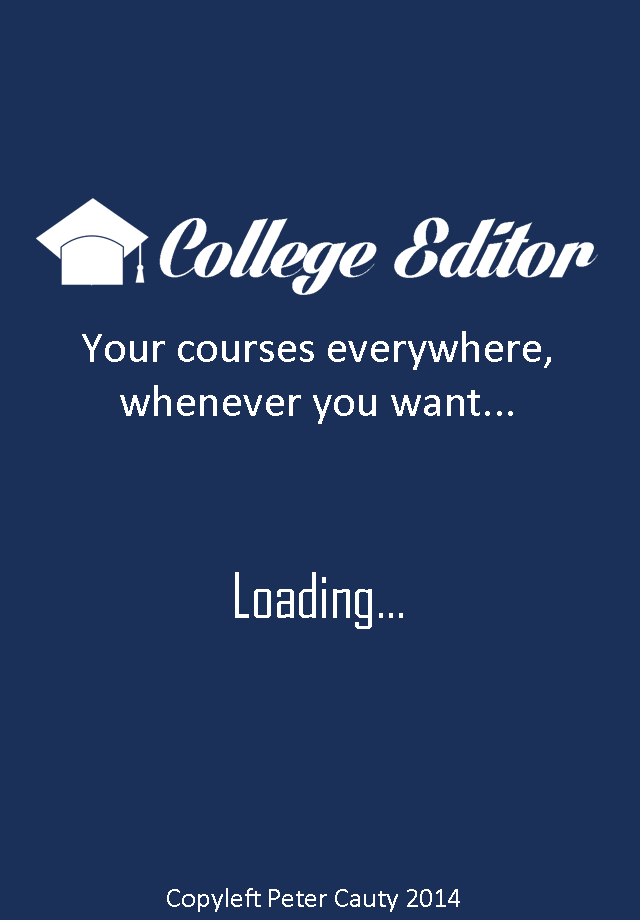
<style>
.page{position:relative;width:640px;height:920px;background:#1a3059}
.page>*{position:absolute;margin:0}
.t1{font:45px "Calibri";color:#ffffff}
.t2{font:60px "AgencyFB-Reg";color:#ffffff}
.t3{font:27.5px "Calibri";color:#ffffff}
</style>
<div class="page">
<p class="t1" style="left:82px;top:331px;width:469px;height:93px;text-align:center">Your courses everywhere,<br>whenever you want...</p>
<p class="t2" style="left:235px;top:572px;width:168px;height:57px">Loading...</p>
<p class="t3" style="left:167px;top:888px;width:293px;height:24px">Copyleft Peter Cauty 2014</p>
</div>
